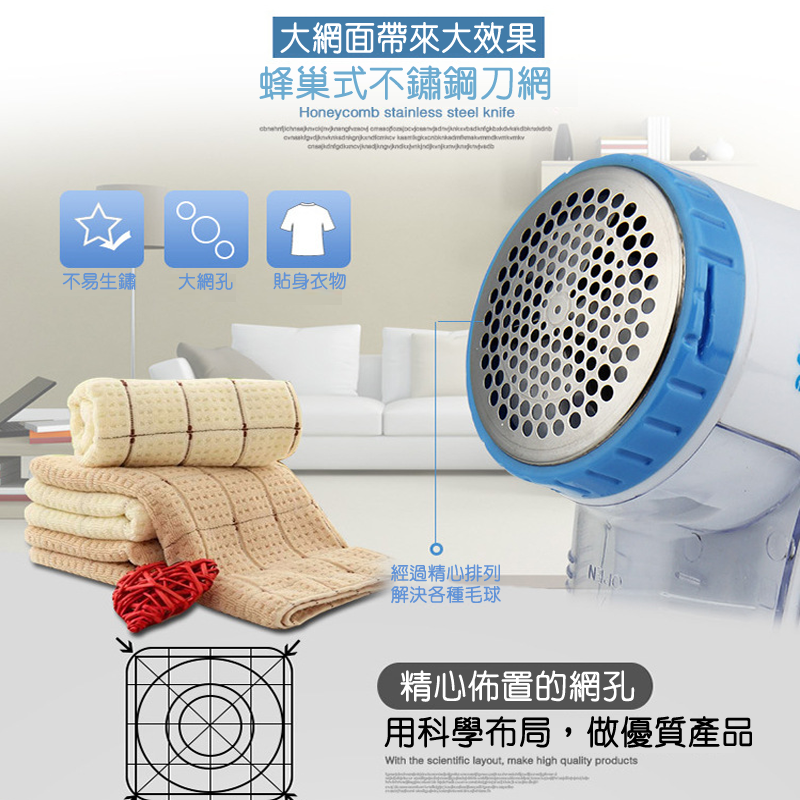
<style>
.page{position:relative;width:800px;height:800px}
.page>*{position:absolute;margin:0}
.t1{font:33.4px "HanWangYenLight";color:#ffffff;font-weight:bold;scale:0.94 1}
.t2{font:36px "HanWangYenLight";color:#6cabd0;font-weight:bold}
.t3{font:18px "HanWangYenLight";color:#6092d7;font-weight:bold}
.t4{font:32.9px "HanWangYenLight";color:#ffffff;font-weight:bold}
.t5{font:32.9px "HanWangYenLight";color:#000000;font-weight:bold}
</style>
<div class="page">
<p class="t1" style="left:280px;top:21px;width:256px;height:33px">大網面帶來大效果</p>
<p class="t2" style="left:259px;top:65px;width:292px;height:36px">蜂巢式不鏽鋼刀網</p>
<p class="t3" style="left:62px;top:272px;width:74px;height:18px">不易生鏽</p>
<p class="t3" style="left:178px;top:272px;width:55px;height:18px">大網孔</p>
<p class="t3" style="left:273px;top:272px;width:73px;height:18px">貼身衣物</p>
<p class="t3" style="left:391px;top:564px;width:110px;height:40px">經過精心排列<br>解決各種毛球</p>
<p class="t4" style="left:400px;top:670px;width:235px;height:32px">精心佈置的網孔</p>
<p class="t5" style="left:384px;top:716px;width:368px;height:32px">用科學布局，做優質產品</p>
</div>
